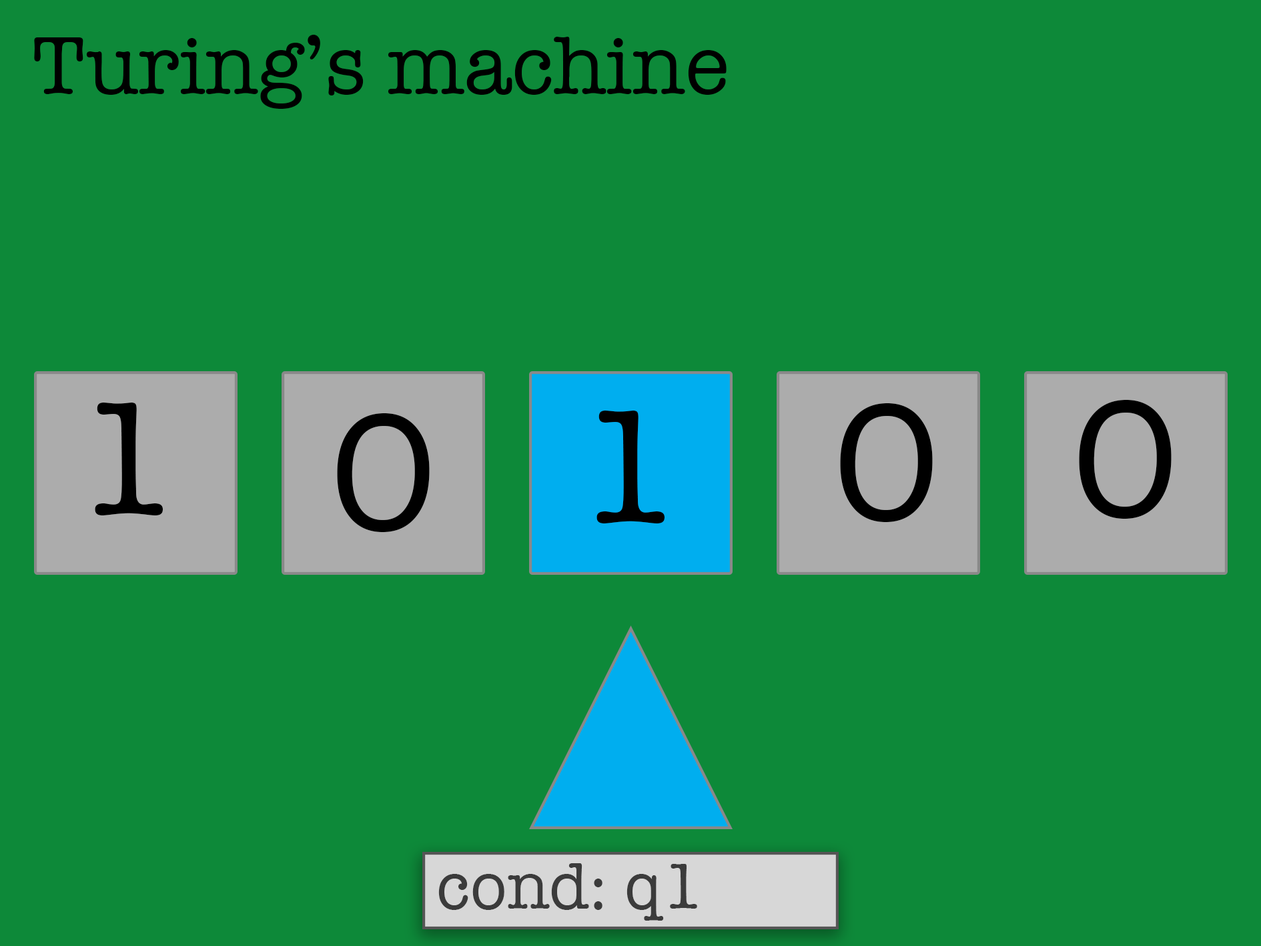
<style>
.page{position:relative;width:1261px;height:946px;background:#0d8939}
.page>*{position:absolute;margin:0}
.t1{font:83.4px "AmericanTypewriter";color:#000000}
.t2{font:166.8px "AmericanTypewriter";color:#000000}
.t3{font:66.7px "AmericanTypewriter";color:#3b3b3b}
</style>
<div class="page">
<p class="t1" style="left:34px;top:35px;width:693px;height:74px">Turing’s machine</p>
<p class="t2" style="left:1079px;top:400px;width:93px;height:118px">0</p>
<p class="t2" style="left:95px;top:402px;width:68px;height:113px">1</p>
<p class="t2" style="left:337px;top:413px;width:93px;height:119px">0</p>
<p class="t2" style="left:597px;top:410px;width:68px;height:113px">1</p>
<p class="t2" style="left:840px;top:403px;width:93px;height:119px">0</p>
<p class="t3" style="left:438px;top:863px;width:259px;height:57px">cond: q1</p>
</div>
